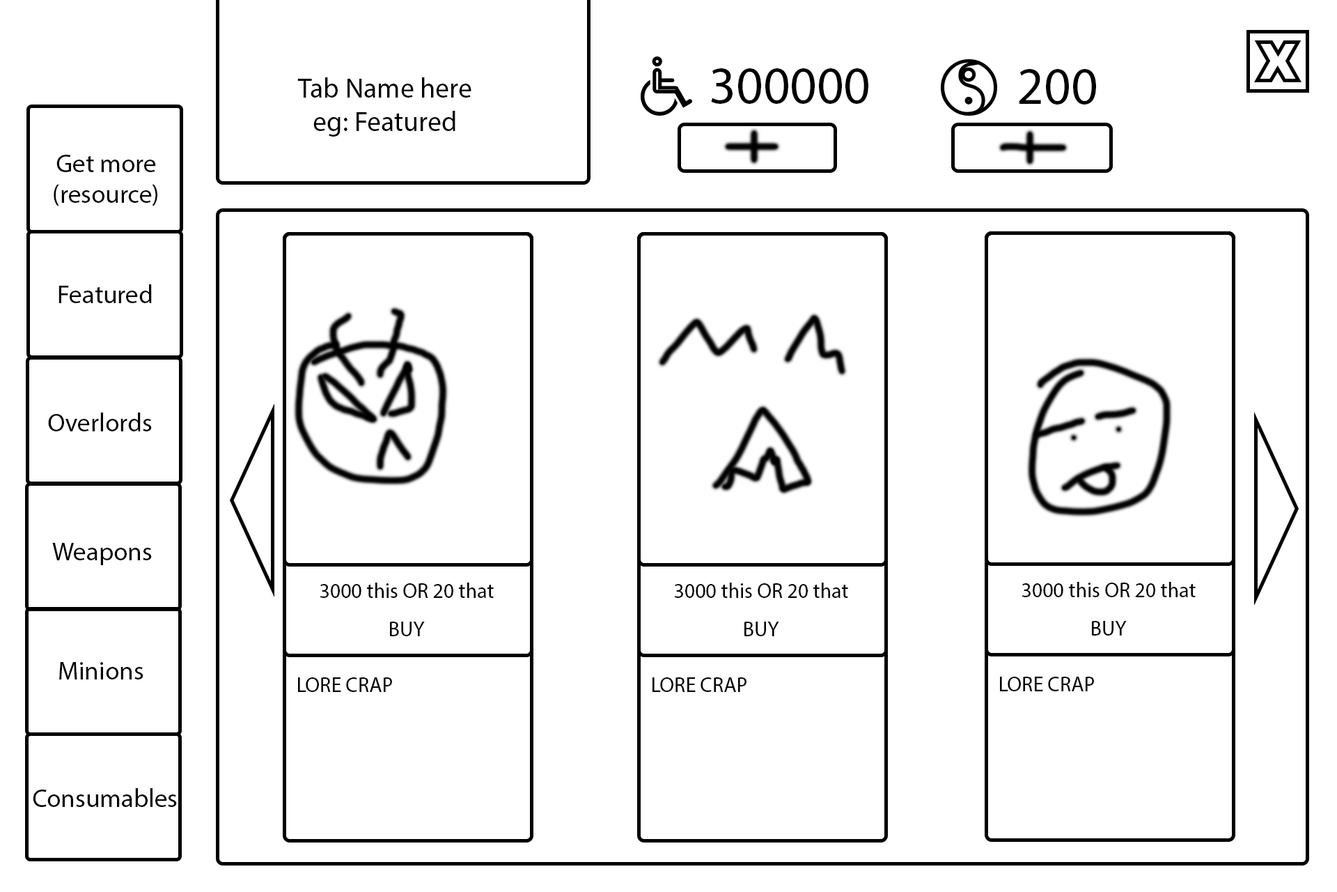
<style>
.page{position:relative;width:1337px;height:892px;background:#ffffff}
.page>*{position:absolute;margin:0}
.t1{font:27.9px "MyriadPro-Regular";color:#000000}
.t2{font:52.4px "MyriadPro-Regular";color:#000000}
.t3{font:25.8px "MyriadPro-Regular";color:#000000}
.t4{font:20.9px "MyriadPro-Regular";color:#000000}
</style>
<div class="page">
<p class="t1" style="left:297px;top:77px;width:175px;height:60px;text-align:center">Tab Name here<br>eg: Featured</p>
<p class="t2" style="left:711px;top:68px;width:158px;height:36px">300000</p>
<p class="t2" style="left:1019px;top:69px;width:77px;height:35px">200</p>
<p class="t3" style="left:54px;top:155px;width:103px;height:50px;text-align:center">Get more<br>(resource)</p>
<p class="t3" style="left:59px;top:284px;width:93px;height:19px">Featured</p>
<p class="t3" style="left:48px;top:412px;width:104px;height:19px">Overlords</p>
<p class="t3" style="left:52px;top:543px;width:100px;height:22px">Weapons</p>
<p class="t4" style="left:1022px;top:582px;width:174px;height:15px">3000 this OR 20 that</p>
<p class="t4" style="left:320px;top:582px;width:174px;height:16px">3000 this OR 20 that</p>
<p class="t4" style="left:674px;top:582px;width:174px;height:16px">3000 this OR 20 that</p>
<p class="t4" style="left:390px;top:621px;width:35px;height:15px">BUY</p>
<p class="t4" style="left:745px;top:621px;width:34px;height:15px">BUY</p>
<p class="t4" style="left:1092px;top:621px;width:35px;height:14px">BUY</p>
<p class="t3" style="left:59px;top:662px;width:84px;height:17px">Minions</p>
<p class="t4" style="left:298px;top:677px;width:94px;height:15px">LORE CRAP</p>
<p class="t4" style="left:653px;top:677px;width:94px;height:15px">LORE CRAP</p>
<p class="t4" style="left:1000px;top:676px;width:94px;height:15px">LORE CRAP</p>
<p class="t3" style="left:33px;top:788px;width:144px;height:19px">Consumables</p>
</div>
